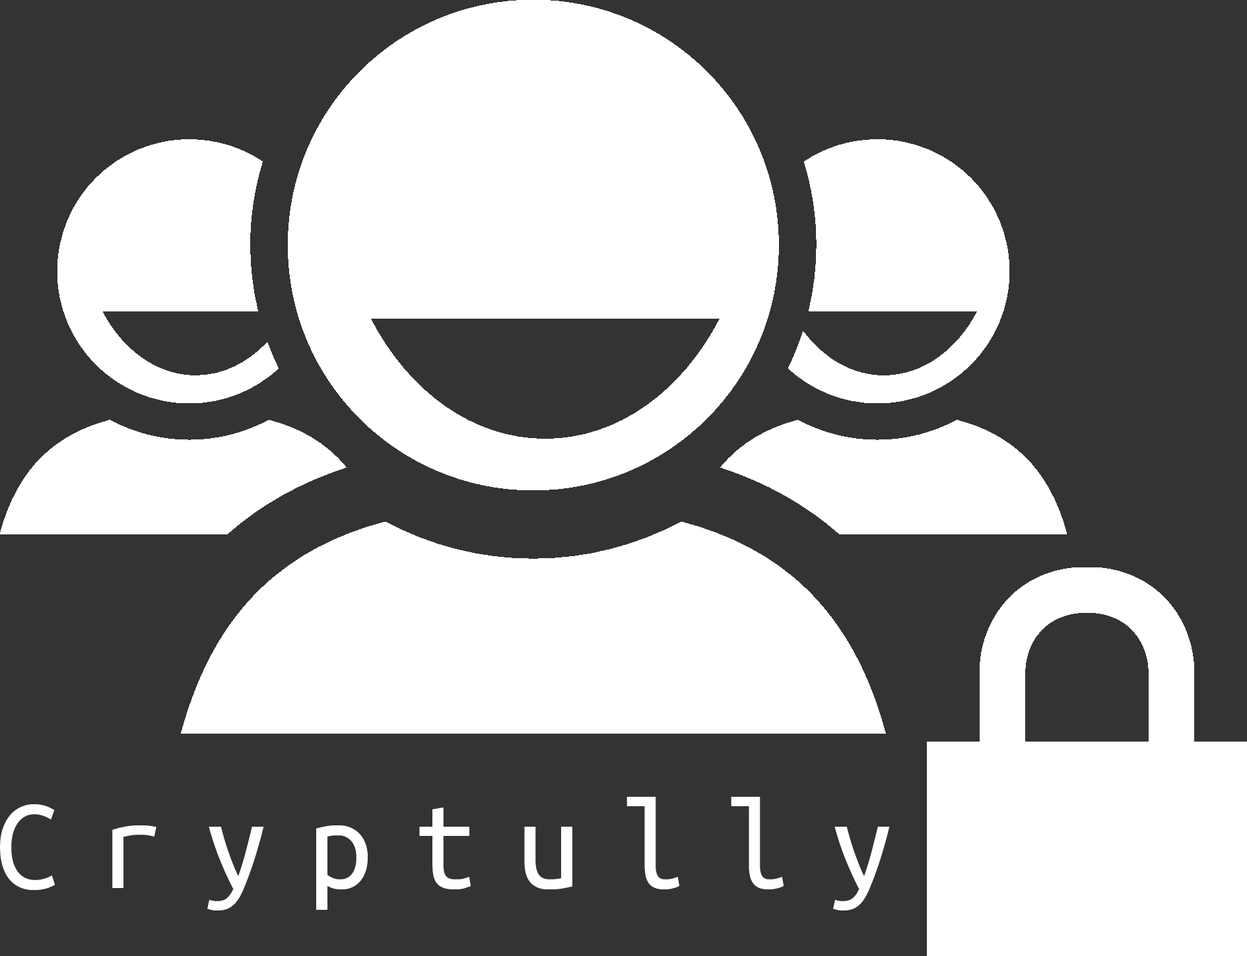
<style>
.page{position:relative;width:1247px;height:956px;background:#333333}
.page>*{position:absolute;margin:0}
.t1{font:132px "UbuntuMono-Regular";letter-spacing:0.29em;color:#ffffff}
</style>
<div class="page">
<p class="t1" style="left:0px;top:797px;width:890px;height:114px">Cryptully</p>
</div>
